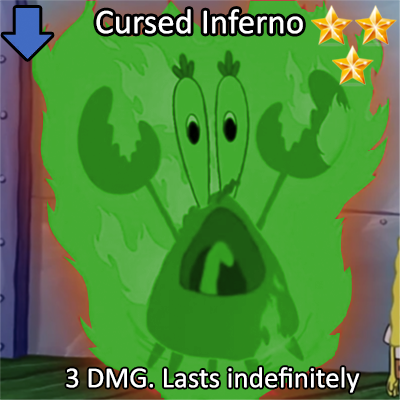
<style>
.page{position:relative;width:400px;height:400px}
.page>*{position:absolute;margin:0}
.t1{font:60px "Calibri";color:#ffffff}
.t2{font:50px "Calibri";color:#ffffff}
</style>
<div class="page">
<p class="t1" style="left:96px;top:9px;width:207px;height:25px">Cursed Inferno</p>
<p class="t2" style="left:66px;top:367px;width:294px;height:26px">3 DMG. Lasts indefinitely</p>
</div>
